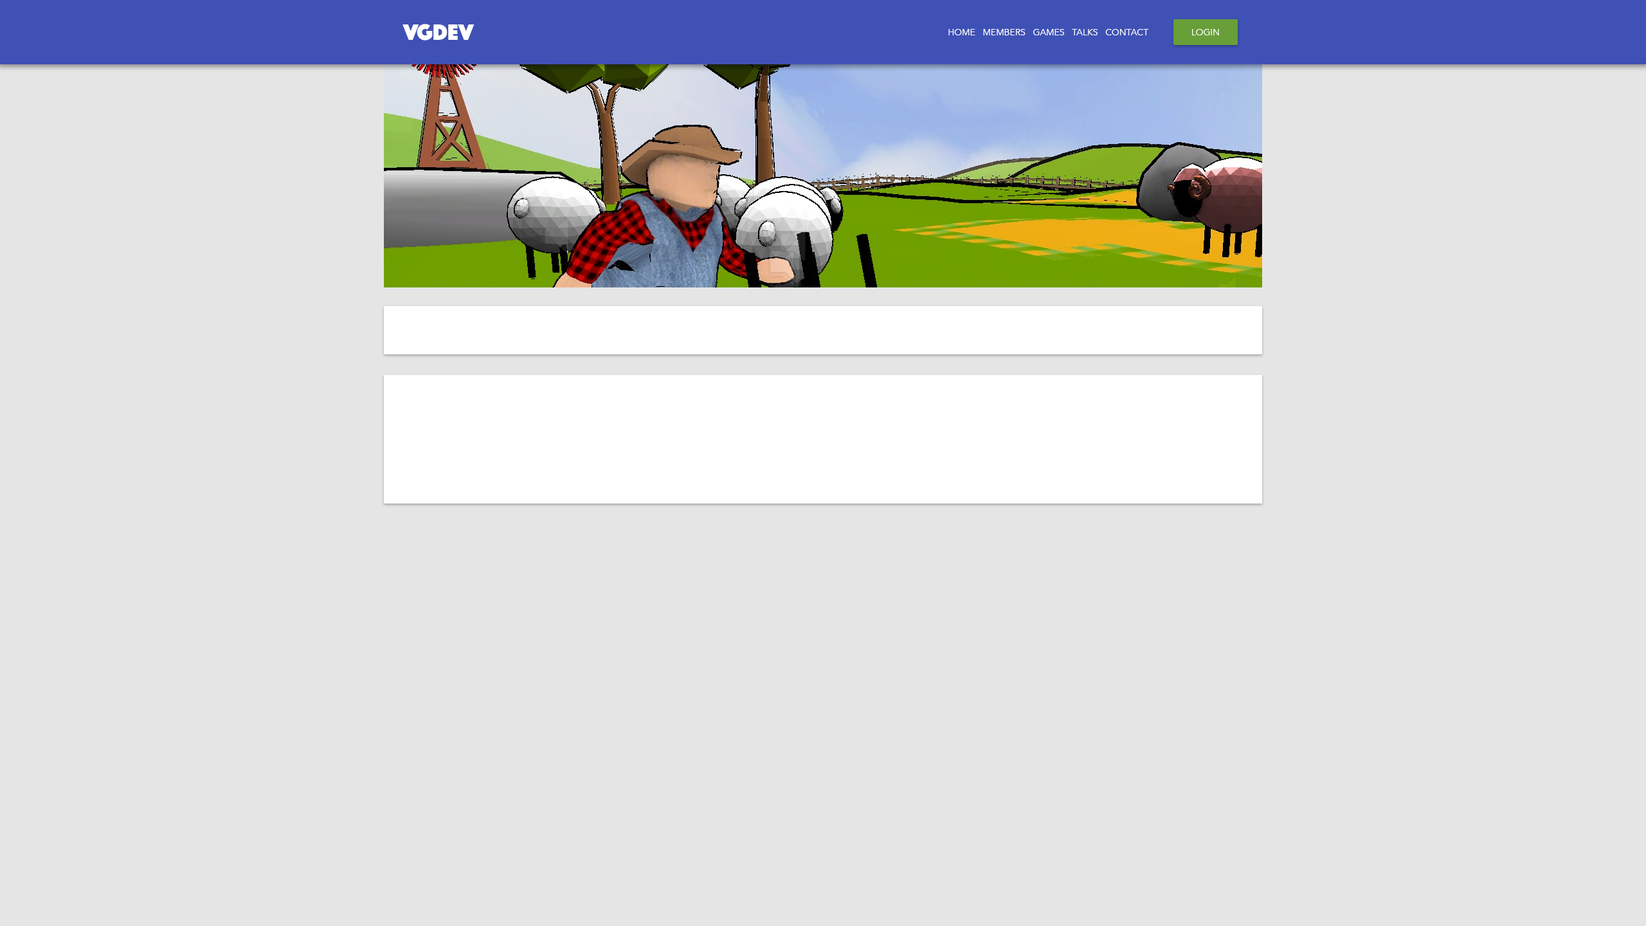
<style>
.page{position:relative;width:1646px;height:926px;background:#e5e5e5}
.page>*{position:absolute;margin:0}
.t1{font:23.1px "Phosphate-Solid";color:#ffffff}
.t2{font:9px "Avenir-Book";color:#ffffff}
</style>
<div class="page">
<p class="t1" style="left:402px;top:24px;width:72px;height:16px">VGDEV</p>
<p class="t2" style="left:948px;top:29px;width:201px;height:6px">HOME   MEMBERS   GAMES   TALKS   CONTACT</p>
<p class="t2" style="left:1192px;top:29px;width:27px;height:6px">LOGIN</p>
</div>
